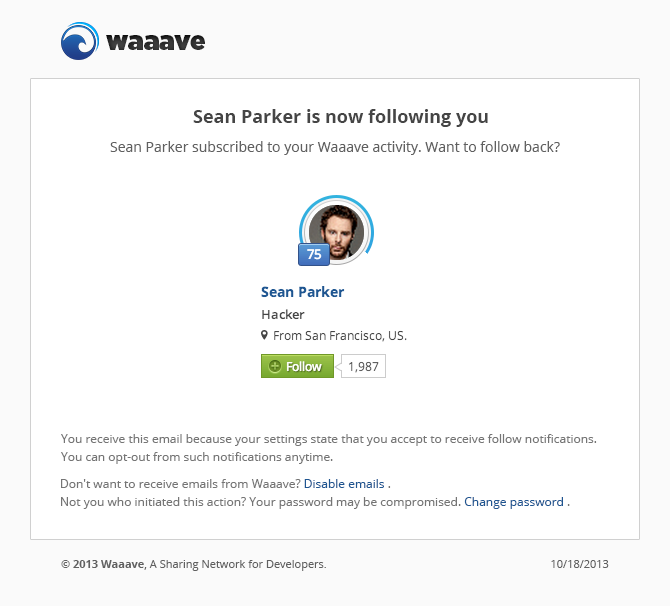
<style>
.page{position:relative;width:670px;height:606px;background:#ffffff}
.page>*{position:absolute;margin:0}
.t1{font:26.1px "Gotham-Ultra";color:#454545}
.t2{font:18px "OpenSans-Bold";color:#454545}
.t3{font:14px "OpenSans";color:#606060}
.t4{font:12px/18px "OpenSans";color:#757575}
.t5{font:12px/18px "OpenSans";color:#1f5691}
.t6{font:11px "OpenSans";color:#606060}
.t7{font:11px "OpenSans-Bold";color:#606060}
</style>
<div class="page">
<p class="t1" style="left:106px;top:35px;width:99px;height:15px">waaave</p>
<p class="t2" style="left:193px;top:109px;width:295px;height:18px">Sean Parker is now following you</p>
<p class="t3" style="left:110px;top:141px;width:450px;height:14px">Sean Parker subscribed to your Waaave activity. Want to follow back?</p>
<p class="t4" style="left:61px;top:434px;width:536px;height:30px">You receive this email because your settings state that you accept to receive follow notifications.<br>You can opt-out from such notifications anytime.</p>
<p class="t4" style="left:61px;top:479px;width:509px;height:30px">Don't want to receive emails from Waaave? <span class="t5">Disable emails</span> .<br>Not you who initiated this action? Your password may be compromised. <span class="t5">Change password</span> .</p>
<p class="t6" style="left:61px;top:560px;width:265px;height:11px"><span class="t7">© 2013 Waaave</span>, A Sharing Network for Developers.</p>
<p class="t6" style="left:551px;top:560px;width:58px;height:8px">10/18/2013</p>
</div>
